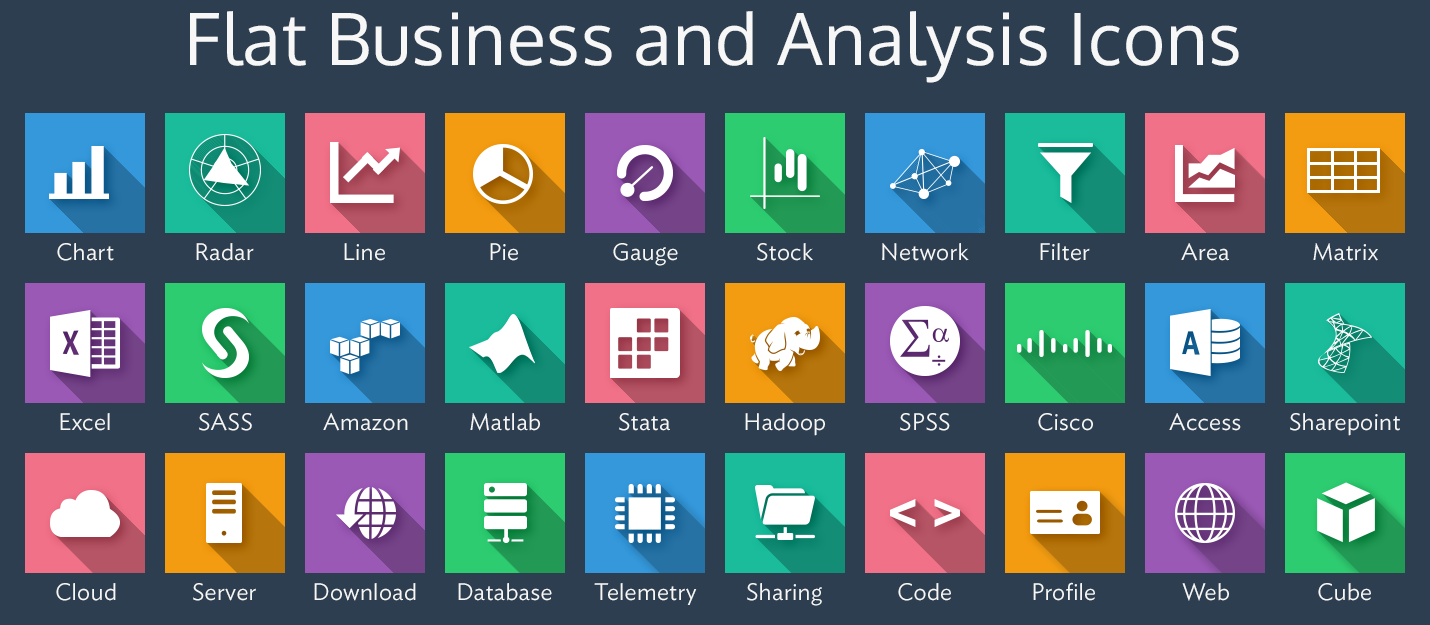
<style>
.page{position:relative;width:1430px;height:625px;background:#2c3e50}
.page>*{position:absolute;margin:0}
.t1{font:72px "Oxygen-Regular";letter-spacing:0.01em;color:#f7f7f7}
.t2{font:24px "IdealSans-Light";letter-spacing:0.01em;color:#f7f7f7}
</style>
<div class="page">
<p class="t1" style="left:190px;top:11px;width:1049px;height:72px">Flat Business and Analysis Icons</p>
<p class="t2" style="left:57px;top:243px;width:57px;height:18px">Chart</p>
<p class="t2" style="left:196px;top:243px;width:58px;height:18px">Radar</p>
<p class="t2" style="left:344px;top:243px;width:41px;height:18px">Line</p>
<p class="t2" style="left:490px;top:243px;width:28px;height:18px">Pie</p>
<p class="t2" style="left:613px;top:243px;width:65px;height:23px">Gauge</p>
<p class="t2" style="left:757px;top:243px;width:56px;height:18px">Stock</p>
<p class="t2" style="left:882px;top:243px;width:87px;height:18px">Network</p>
<p class="t2" style="left:1040px;top:243px;width:50px;height:18px">Filter</p>
<p class="t2" style="left:1181px;top:243px;width:48px;height:18px">Area</p>
<p class="t2" style="left:1313px;top:243px;width:65px;height:18px">Matrix</p>
<p class="t2" style="left:60px;top:413px;width:50px;height:18px">Excel</p>
<p class="t2" style="left:199px;top:413px;width:53px;height:18px">SASS</p>
<p class="t2" style="left:323px;top:413px;width:85px;height:18px">Amazon</p>
<p class="t2" style="left:470px;top:413px;width:70px;height:18px">Matlab</p>
<p class="t2" style="left:619px;top:413px;width:51px;height:18px">Stata</p>
<p class="t2" style="left:745px;top:413px;width:80px;height:23px">Hadoop</p>
<p class="t2" style="left:900px;top:413px;width:50px;height:18px">SPSS</p>
<p class="t2" style="left:1038px;top:413px;width:55px;height:18px">Cisco</p>
<p class="t2" style="left:1169px;top:413px;width:72px;height:18px">Access</p>
<p class="t2" style="left:1290px;top:413px;width:110px;height:23px">Sharepoint</p>
<p class="t2" style="left:1033px;top:582px;width:62px;height:19px">Profile</p>
<p class="t2" style="left:56px;top:583px;width:60px;height:18px">Cloud</p>
<p class="t2" style="left:193px;top:583px;width:63px;height:18px">Server</p>
<p class="t2" style="left:314px;top:583px;width:102px;height:18px">Download</p>
<p class="t2" style="left:458px;top:583px;width:94px;height:18px">Database</p>
<p class="t2" style="left:594px;top:583px;width:103px;height:22px">Telemetry</p>
<p class="t2" style="left:747px;top:583px;width:75px;height:23px">Sharing</p>
<p class="t2" style="left:898px;top:583px;width:53px;height:18px">Code</p>
<p class="t2" style="left:1182px;top:583px;width:47px;height:18px">Web</p>
<p class="t2" style="left:1318px;top:583px;width:53px;height:18px">Cube</p>
</div>
